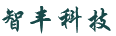
<style>
.page{position:relative;width:116px;height:36px;background:#ffffff}
.page>*{position:absolute;margin:0}
.t1{font:28px "STXingkai";letter-spacing:0.025em;color:#184949}
</style>
<div class="page">
<p class="t1" style="left:2px;top:6px;width:109px;height:28px">智丰科技</p>
</div>
